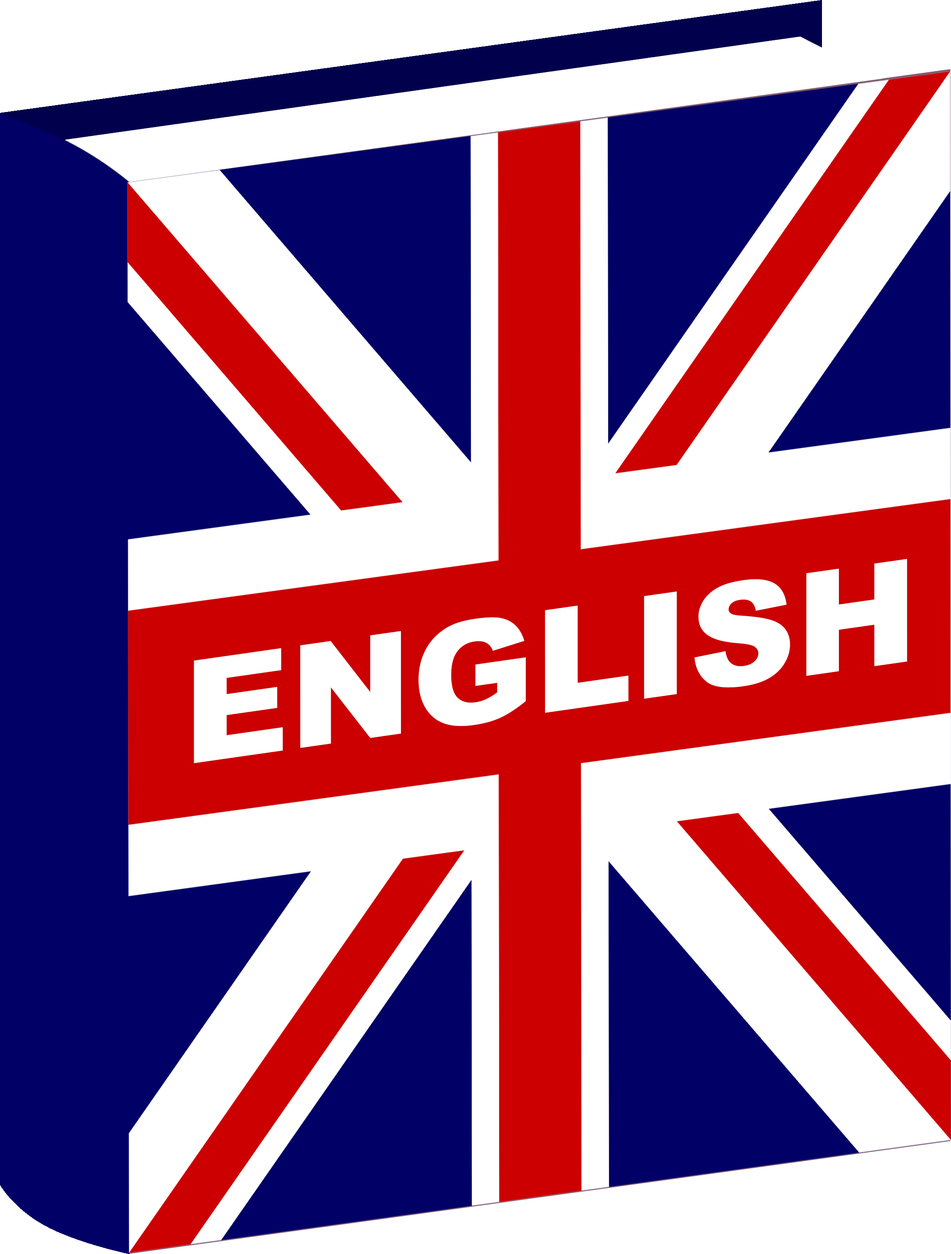
<style>
.page{position:relative;width:951px;height:1254px;background:#ffffff}
.page>*{position:absolute;margin:0}
.t1{font:143.2px "Arial-Black";color:#ffffff;scale:1.04 1}
</style>
<div class="page">
<p class="t1" style="left:194px;top:559px;width:713px;height:205px;rotate:-8deg">ENGLISH</p>
</div>
